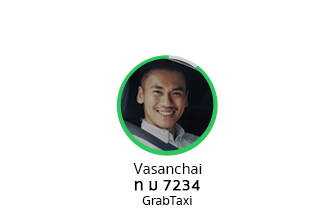
<style>
.page{position:relative;width:335px;height:224px;background:#ffffff}
.page>*{position:absolute;margin:0}
.t1{font:14px "SukhumvitSet-Medium";color:#000000}
.t2{font:14.1px "SukhumvitSet-Medium";color:#000000;font-weight:bold}
.t3{font:11.8px "SukhumvitSet-Medium";color:#000000}
</style>
<div class="page">
<p class="t1" style="left:133px;top:163px;width:69px;height:11px">Vasanchai</p>
<p class="t2" style="left:134px;top:180px;width:66px;height:11px">ท ม 7234</p>
<p class="t3" style="left:142px;top:196px;width:50px;height:9px">GrabTaxi</p>
</div>
